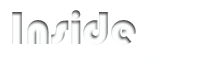
<style>
.page{position:relative;width:200px;height:80px;background:#ffffff}
.page>*{position:absolute;margin:0}
.t1{font:48px "STHupo";color:#feffff}
</style>
<div class="page">
<p class="t1" style="left:12px;top:10px;width:124px;height:35px">Inside</p>
</div>
